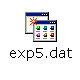
<style>
.page{position:relative;width:80px;height:80px;background:#ffffff}
.page>*{position:absolute;margin:0}
.t1{font:14px "MSReferenceSansSerif";color:#000000}
</style>
<div class="page">
<p class="t1" style="left:10px;top:47px;width:62px;height:14px">exp5.dat</p>
</div>
